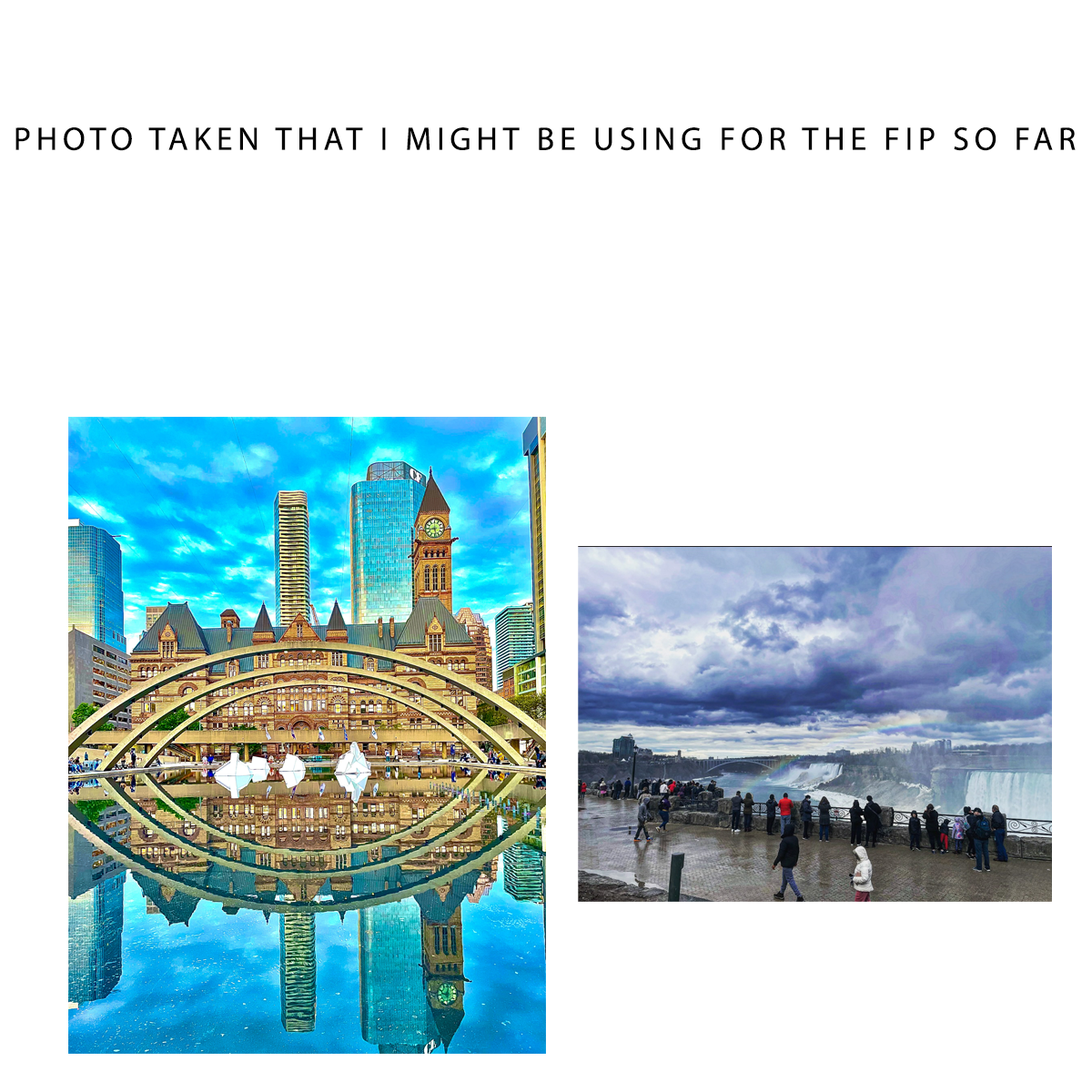
<style>
.page{position:relative;width:1092px;height:1092px;background:#ffffff}
.page>*{position:absolute;margin:0}
.t1{font:32.8px "MyriadPro-Regular";letter-spacing:0.16em;color:#000000}
</style>
<div class="page">
<p class="t1" style="left:15px;top:127px;width:1061px;height:24px">PHOTO TAKEN THAT I MIGHT BE USING FOR THE FIP SO FAR</p>
</div>
